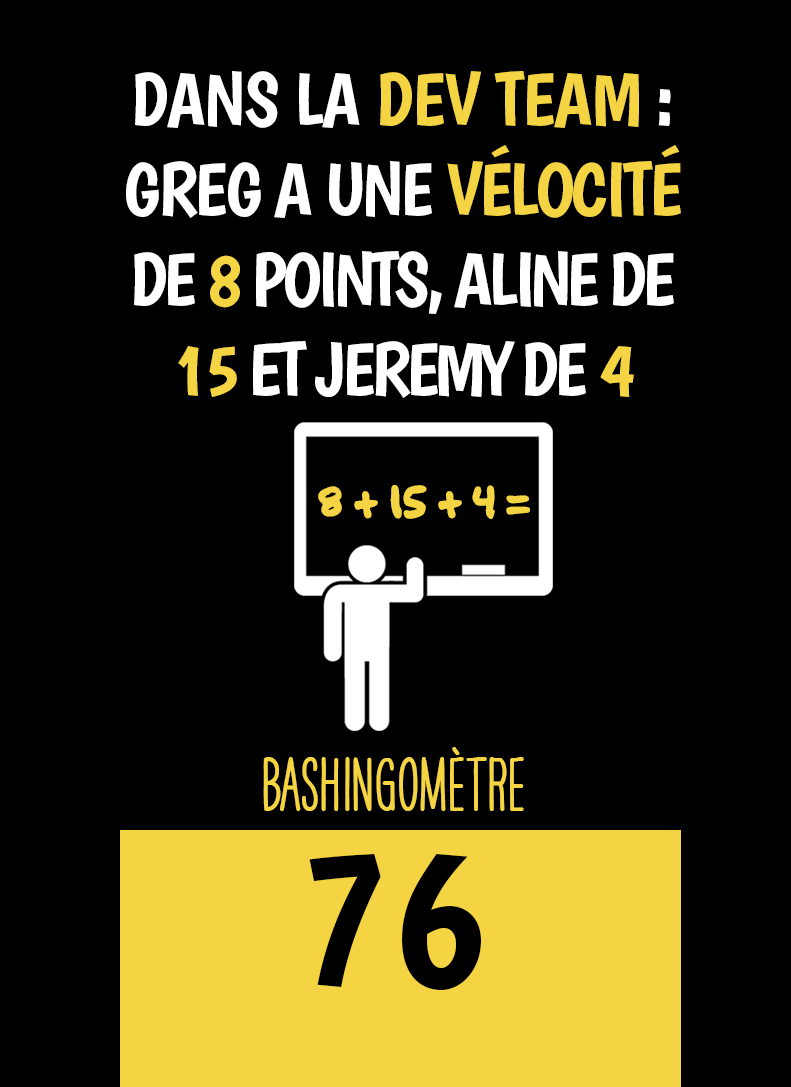
<style>
.page{position:relative;width:791px;height:1087px;background:#000000}
.page>*{position:absolute;margin:0}
.t1{font:75px "Boogaloo-Regular";letter-spacing:-0.06em;color:#ffffff}
.t2{font:75px "Boogaloo-Regular";letter-spacing:-0.02em;color:#ffffff}
.t3{font:75px "Boogaloo-Regular";letter-spacing:-0.02em;color:#f4d443}
.t4{font:75px "Boogaloo-Regular";letter-spacing:-0.04em;color:#ffffff}
.t5{font:75px "Boogaloo-Regular";letter-spacing:-0.04em;color:#f4d443}
.t6{font:75px "Boogaloo-Regular";letter-spacing:-0.06em;color:#f4d443}
.t7{font:58.3px "OakStreetW01-Regular";letter-spacing:-0.08em;color:#f4d443}
.t8{font:66.7px "HAVEANICEDAYTallW04-Bold";color:#f4d443}
.t9{font:200px "Boogaloo-Regular";color:#000000}
</style>
<div class="page">
<p class="t1" style="left:126px;top:71px;width:555px;height:327px;text-align:center"><span class="t2">DANS LA </span><span class="t3">DEV TEAM</span><span class="t2"> : </span><span class="t4">GREG A UNE </span><span class="t5">VÉLOCITÉ </span>DE <span class="t6">8</span> POINTS, ALINE DE <span class="t6">15</span> ET JEREMY DE <span class="t5">4</span></p>
<p class="t7" style="left:318px;top:485px;width:212px;height:34px">8 + 15 + 4 =</p>
<p class="t8" style="left:263px;top:747px;width:261px;height:64px">BASHINgomètre</p>
<p class="t9" style="left:309px;top:854px;width:172px;height:136px">76</p>
</div>
